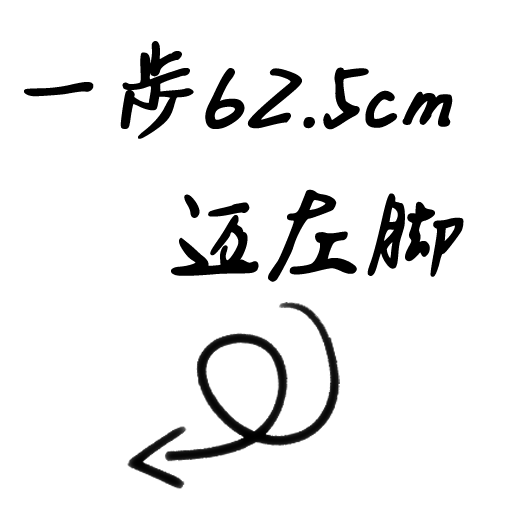
<style>
.page{position:relative;width:512px;height:512px;background:#ffffff}
.page>*{position:absolute;margin:0}
.t1{font:96px/146.7px "CMSXTJ";color:#000000;font-weight:bold;font-style:italic}
</style>
<div class="page">
<p class="t1" style="left:24px;top:41px;width:440px;height:241px">一步62.5cm<br>    迈左脚</p>
</div>
